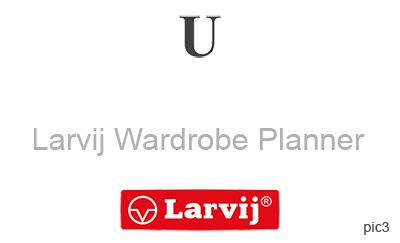
<style>
.page{position:relative;width:400px;height:243px;background:#ffffff}
.page>*{position:absolute;margin:0}
.t1{font:31px "ArialMT";color:#b1b1b1}
.t2{font:14.3px "ArialMT";color:#4e4e4e}
</style>
<div class="page">
<p class="t1" style="left:33px;top:128px;width:332px;height:28px">Larvij Wardrobe Planner</p>
<p class="t2" style="left:364px;top:222px;width:25px;height:13px">pic3</p>
</div>
